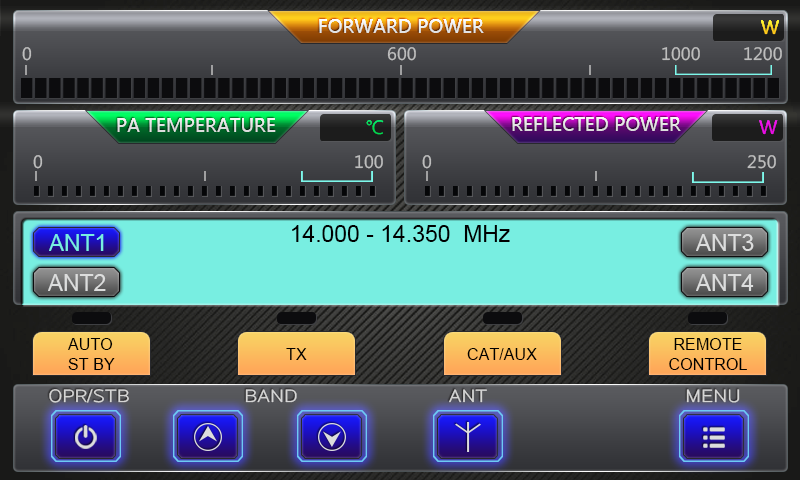
<style>
.page{position:relative;width:800px;height:480px}
.page>*{position:absolute;margin:0}
.t1{font:18.7px "MicrosoftYaHei";color:#e2e3e3}
.t2{font:18px "MicrosoftYaHei";color:#fec81a}
.t3{font:16.7px "MicrosoftYaHei";color:#bdbdbd}
.t4{font:18.7px "MicrosoftYaHei";color:#dcdddd}
.t5{font:18px "MicrosoftYaHei";color:#00d74f}
.t6{font:18px "MicrosoftYaHei";color:#e90de4}
.t7{font:22.9px "ArialMT";color:#000000}
.t8{font:22.9px "ArialMT";color:#78eee1}
.t9{font:22.9px "ArialMT";color:#dcdddd}
.t10{font:16.7px/20.8px "ArialMT";color:#000000}
.t11{font:16.7px "ArialMT";color:#000000}
.t12{font:18.2px "AaBianHei";color:#d5d5d5}
</style>
<div class="page">
<p class="t1" style="left:319px;top:19px;width:165px;height:14px">FORWARD POWER</p>
<p class="t2" style="left:761px;top:20px;width:18px;height:15px">W</p>
<p class="t3" style="left:22px;top:47px;width:10px;height:14px">0</p>
<p class="t3" style="left:387px;top:47px;width:29px;height:14px">600</p>
<p class="t3" style="left:662px;top:47px;width:38px;height:14px">1000</p>
<p class="t3" style="left:744px;top:47px;width:38px;height:14px">1200</p>
<p class="t4" style="left:117px;top:118px;width:159px;height:14px">PA TEMPERATURE</p>
<p class="t5" style="left:366px;top:120px;width:18px;height:15px">℃</p>
<p class="t4" style="left:512px;top:117px;width:169px;height:14px">REFLECTED POWER</p>
<p class="t6" style="left:759px;top:120px;width:19px;height:15px">W</p>
<p class="t3" style="left:33px;top:155px;width:10px;height:14px">0</p>
<p class="t3" style="left:355px;top:155px;width:28px;height:14px">100</p>
<p class="t3" style="left:422px;top:155px;width:10px;height:14px">0</p>
<p class="t3" style="left:747px;top:155px;width:29px;height:14px">250</p>
<p class="t7" style="left:292px;top:225px;width:218px;height:17px">14.000 - 14.350  MHz</p>
<p class="t8" style="left:49px;top:234px;width:55px;height:17px">ANT1</p>
<p class="t9" style="left:696px;top:234px;width:58px;height:17px">ANT3</p>
<p class="t9" style="left:48px;top:274px;width:58px;height:17px">ANT2</p>
<p class="t9" style="left:696px;top:274px;width:58px;height:17px">ANT4</p>
<p class="t10" style="left:68px;top:338px;width:47px;height:32px">AUTO<br>ST BY</p>
<p class="t10" style="left:669px;top:338px;width:78px;height:32px;text-align:center">REMOTE<br>CONTROL</p>
<p class="t11" style="left:286px;top:348px;width:21px;height:12px">TX</p>
<p class="t11" style="left:467px;top:348px;width:70px;height:12px">CAT/AUX</p>
<p class="t12" style="left:49px;top:389px;width:80px;height:14px">OPR/STB</p>
<p class="t12" style="left:245px;top:389px;width:52px;height:14px">BAND</p>
<p class="t12" style="left:449px;top:389px;width:38px;height:14px">ANT</p>
<p class="t12" style="left:686px;top:389px;width:54px;height:14px">MENU</p>
</div>
